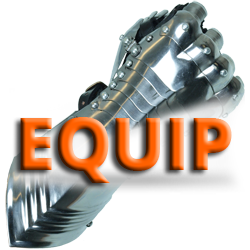
<style>
.page{position:relative;width:250px;height:250px;background:#ffffff}
.page>*{position:absolute;margin:0}
.t1{font:73px "OpenSans-Extrabold";letter-spacing:-0.02em}
</style>
<div class="page">
<p class="t1" style="left:20px;top:117px;width:212px;height:66px">EQUIP</p>
</div>
